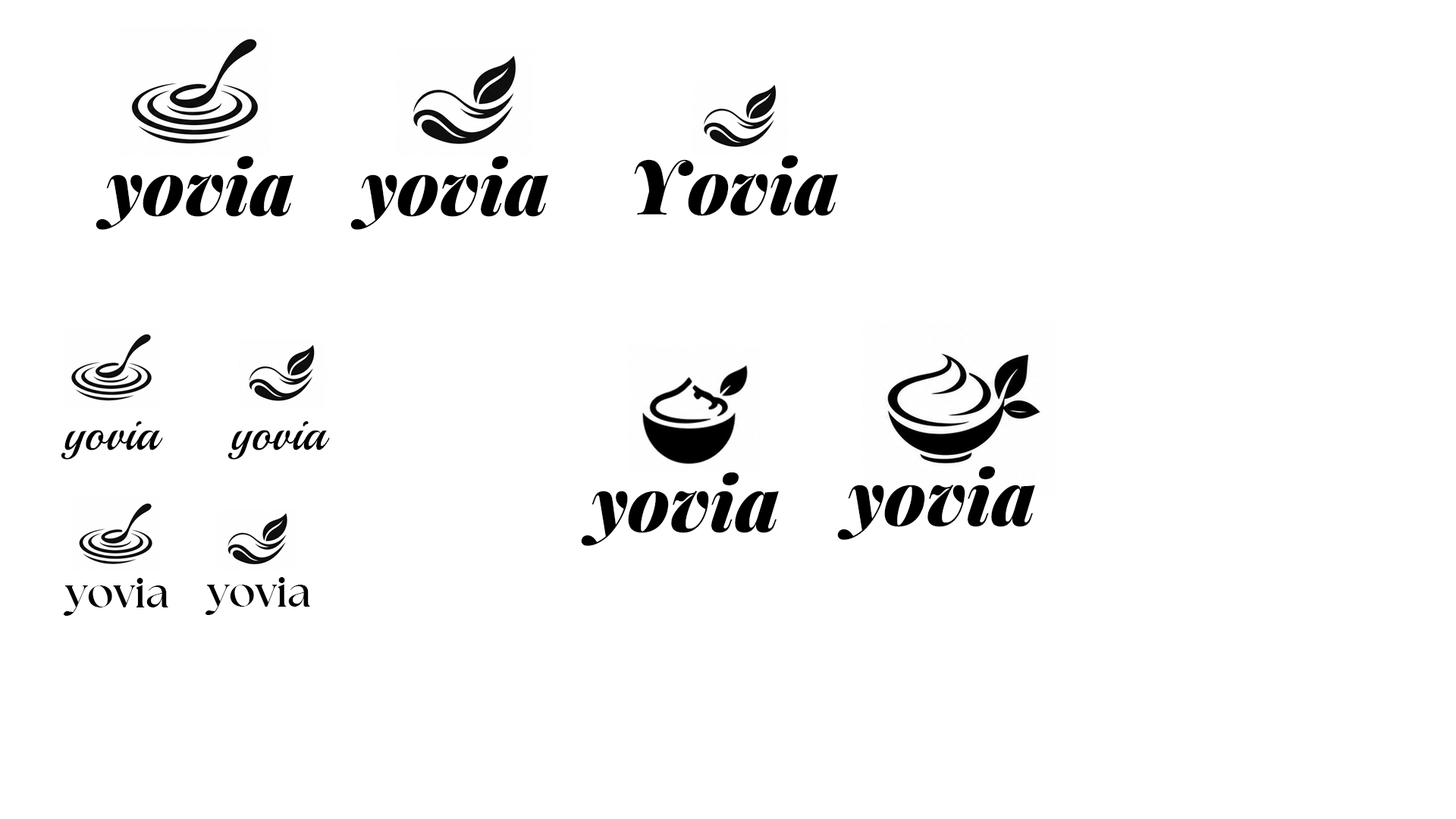
<style>
.page{position:relative;width:1456px;height:819px;background:#ffffff}
.page>*{position:absolute;margin:0}
.t1{font:75.8px "PlayfairDisplayItalic-BlackItalic";color:#000000}
.t2{font:48.1px "Playball-Regular";color:#000000}
.t3{font:43.9px "TheSeasonsBold";color:#000000}
</style>
<div class="page">
<p class="t1" style="left:96px;top:155px;width:197px;height:75px">yovia</p>
<p class="t1" style="left:350px;top:155px;width:198px;height:75px">yovia</p>
<p class="t1" style="left:634px;top:155px;width:204px;height:61px">Yovia</p>
<p class="t2" style="left:61px;top:421px;width:102px;height:39px">yovia</p>
<p class="t2" style="left:227px;top:421px;width:103px;height:39px">yovia</p>
<p class="t1" style="left:581px;top:472px;width:198px;height:74px">yovia</p>
<p class="t1" style="left:837px;top:466px;width:198px;height:74px">yovia</p>
<p class="t3" style="left:63px;top:578px;width:105px;height:38px">yovia</p>
<p class="t3" style="left:205px;top:577px;width:105px;height:38px">yovia</p>
</div>
